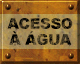
<style>
.page{position:relative;width:80px;height:64px}
.page>*{position:absolute;margin:0}
.t1{font:14.7px/16px "Arial-Black";letter-spacing:-0.015em;text-transform:uppercase}
.t2{font:12px/16px "Arial-Black";letter-spacing:0.005em;text-transform:uppercase}
</style>
<div class="page">
<p class="t1" style="left:7px;top:18px;width:66px;height:27px;text-align:center"><span class="t2"><br></span>aCESSO<br>À ÁGUA</p>
</div>
